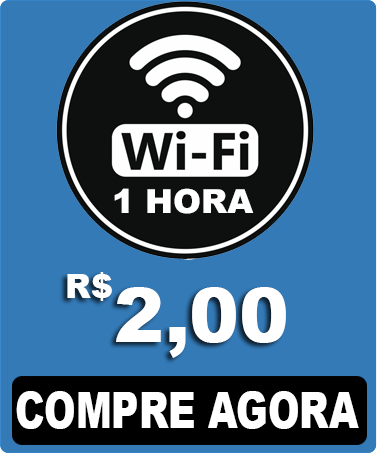
<style>
.page{position:relative;width:377px;height:453px;background:#337ab7}
.page>*{position:absolute;margin:0}
.t1{font:33.3px "Arial-Black";color:#ffffff}
.t2{font:33.3px "Arial-Black";color:#fefefe}
.t3{font:75px "Arial-Black";color:#ffffff}
.t4{font:49.8px "Arial-Black";color:#ffffff;scale:0.76 1}
</style>
<div class="page">
<p class="t1" style="left:114px;top:188px;width:140px;height:26px">1 HORA</p>
<p class="t2" style="left:67px;top:272px;width:45px;height:29px">R$</p>
<p class="t3" style="left:116px;top:287px;width:170px;height:71px">2,00</p>
<p class="t4" style="left:16px;top:391px;width:343px;height:38px">COMPRE AGORA</p>
</div>
